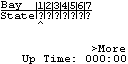
<style>
.page{position:relative;width:128px;height:64px;background:#ffffff}
.page>*{position:absolute;margin:0}
.t1{font:10.7px "CourierNewPSMT";color:#000000}
.t2{font:10.7px "CourierNewPSMT";letter-spacing:0.085em;color:#000000}
</style>
<div class="page">
<p class="t1" style="left:1px;top:1px;width:21px;height:9px">Bay</p>
<p class="t2" style="left:38px;top:2px;width:53px;height:7px">1234567</p>
<p class="t1" style="left:1px;top:12px;width:33px;height:7px">State</p>
<p class="t2" style="left:39px;top:12px;width:51px;height:7px">???????</p>
<p class="t1" style="left:38px;top:21px;width:5px;height:3px">^</p>
<p class="t1" style="left:92px;top:45px;width:33px;height:7px">&gt;More</p>
<p class="t1" style="left:22px;top:55px;width:104px;height:9px">Up Time: 000:00</p>
</div>
